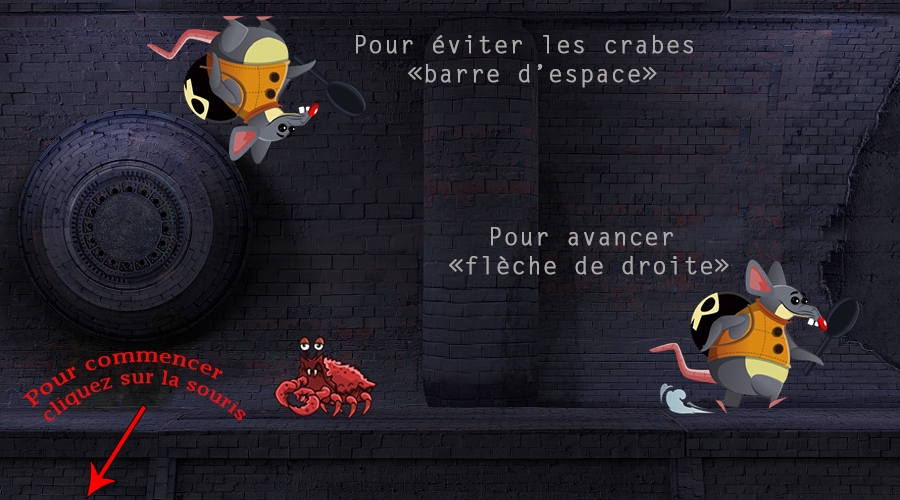
<style>
.page{position:relative;width:900px;height:500px}
.page>*{position:absolute;margin:0}
.t1{font:24px "LetterGothicStd";letter-spacing:0.025em;color:#ada9a9;font-weight:bold}
.t2{font:18px "LucidaBright";letter-spacing:0.025em;color:#f20d0d}
</style>
<div class="page">
<p class="t1" style="left:356px;top:35px;width:337px;height:53px;text-align:center">Pour éviter les crabes <br>«barre d’espace»</p>
<p class="t1" style="left:449px;top:227px;width:280px;height:48px;text-align:center">Pour avancer <br>«flèche de droite»</p>
<p class="t2" style="left:23px;top:351px;width:223px;height:70px">Pour commencer<br>cliquez sur la souris</p>
</div>
